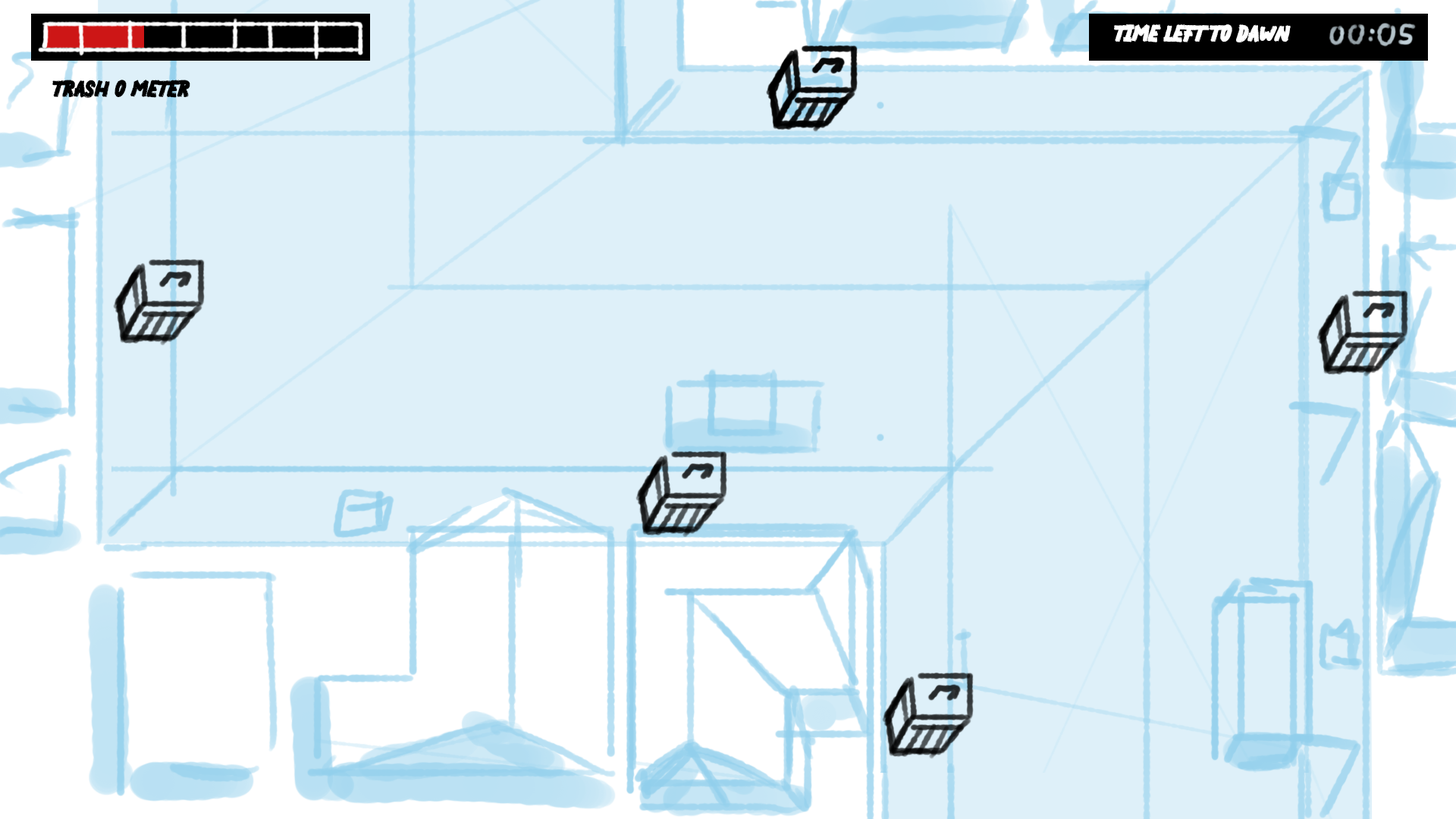
<style>
.page{position:relative;width:1456px;height:819px;background:#def0f9}
.page>*{position:absolute;margin:0}
.t1{font:23.1px "THANKYOUKOBE";color:#ffffff}
.t2{font:23.1px "THANKYOUKOBE";color:#000000}
</style>
<div class="page">
<p class="t1" style="left:1114px;top:24px;width:177px;height:18px">time left to dawn</p>
<p class="t2" style="left:52px;top:80px;width:138px;height:18px">trash o meter</p>
</div>
